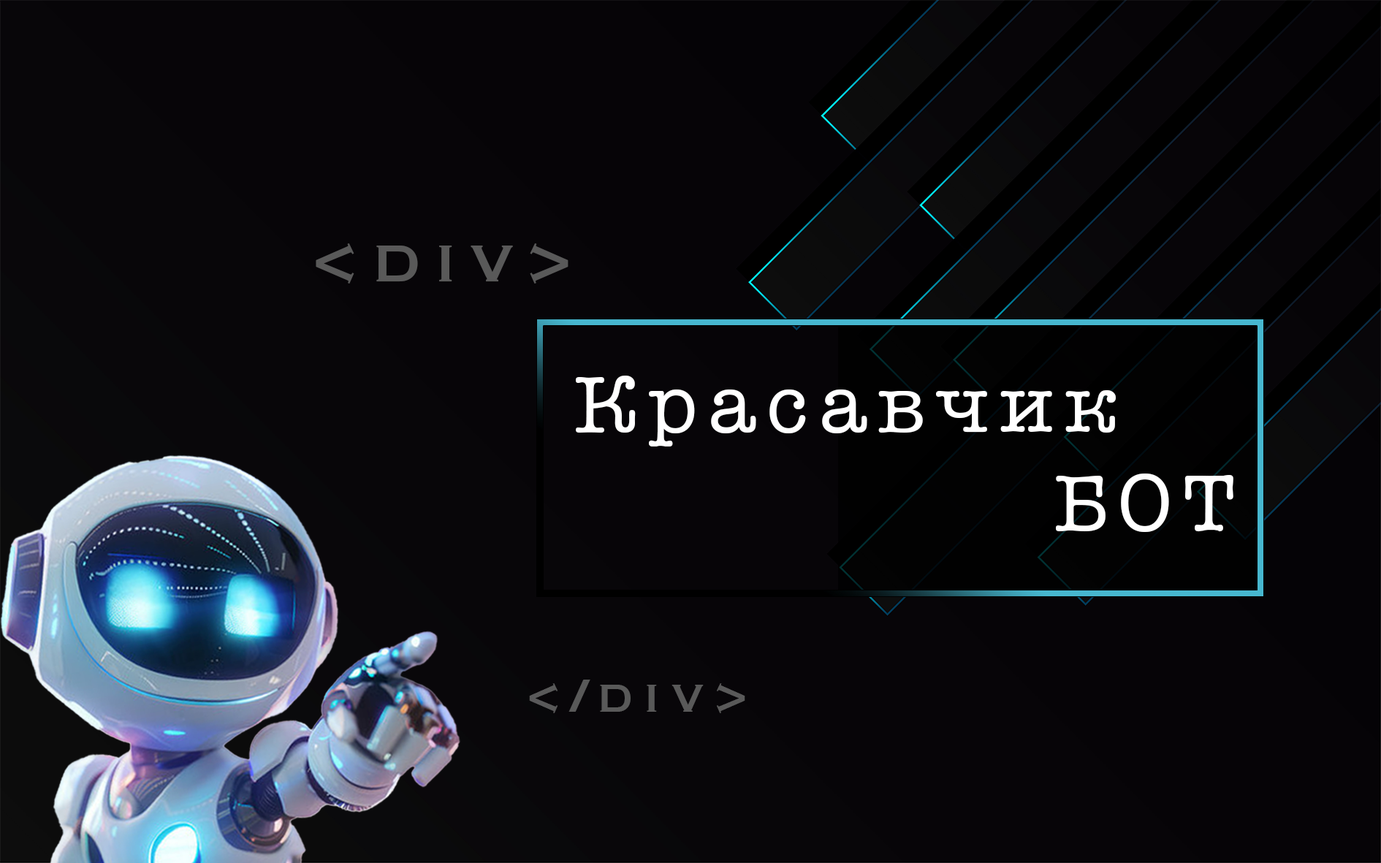
<style>
.page{position:relative;width:1381px;height:863px;background:#070508}
.page>*{position:absolute;margin:0}
.t1{font:82.2px "Copperplate";letter-spacing:0.139em;color:#595959}
.t2{font:82.2px "AmericanTypewriter";letter-spacing:0.139em;color:#ffffff}
.t3{font:60.9px "Copperplate";letter-spacing:0.139em;color:#595959}
</style>
<div class="page">
<p class="t1" style="left:316px;top:243px;width:253px;height:41px">&lt;div&gt;</p>
<p class="t2" style="left:576px;top:376px;width:658px;height:156px">Красавчик <br>               БОТ</p>
<p class="t3" style="left:529px;top:680px;width:217px;height:33px">&lt;/div&gt;</p>
</div>
